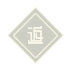
<style>
.page{position:relative;width:70px;height:70px;background:#ffffff}
.page>*{position:absolute;margin:0}
.t1{font:18.9px "HYQingTing-EEJ";letter-spacing:-0.01em}
</style>
<div class="page">
<p class="t1" style="left:27px;top:26px;width:17px;height:18px">返</p>
</div>
